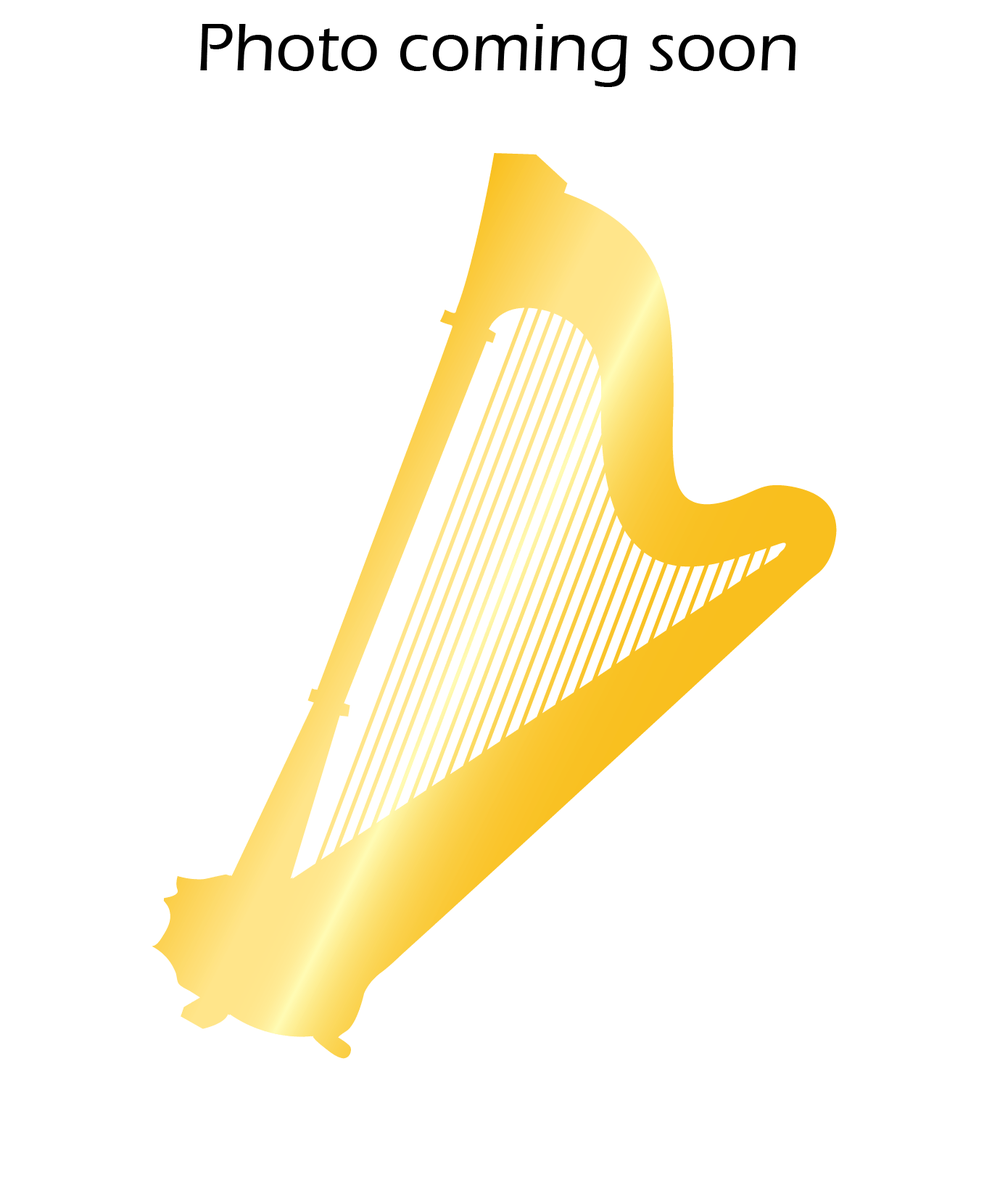
<style>
.page{position:relative;width:992px;height:1201px;background:#ffffff}
.page>*{position:absolute;margin:0}
.t1{font:69.6px "ErasITC-Medium";color:#000000}
</style>
<div class="page">
<p class="t1" style="left:200px;top:24px;width:597px;height:63px">Photo coming soon</p>
</div>
